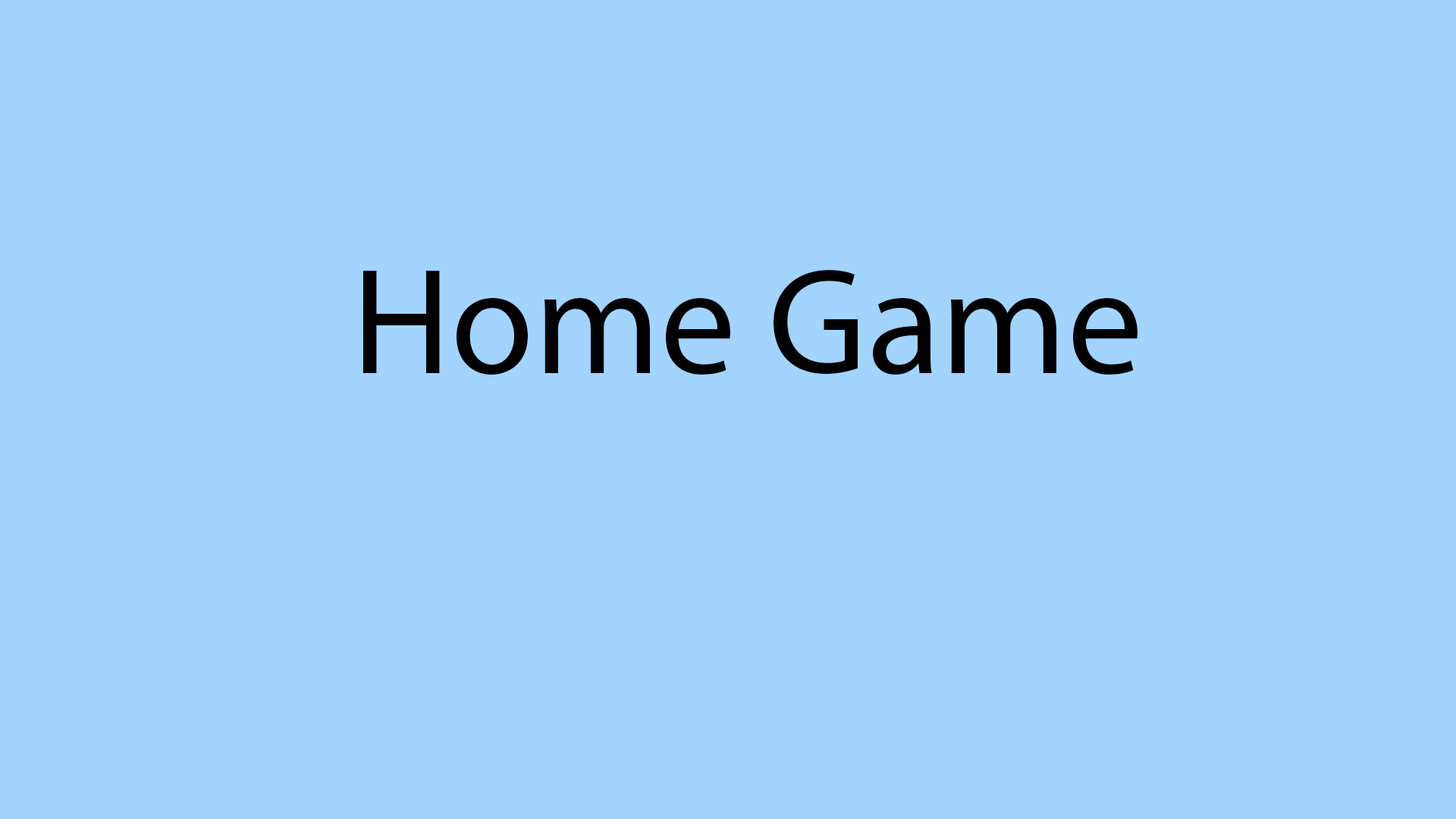
<style>
.page{position:relative;width:1456px;height:819px;background:#a2d4ff}
.page>*{position:absolute;margin:0}
.t1{font:151.7px "MyriadPro-Regular";color:#000000}
</style>
<div class="page">
<p class="t1" style="left:363px;top:270px;width:774px;height:105px">Home Game</p>
</div>
